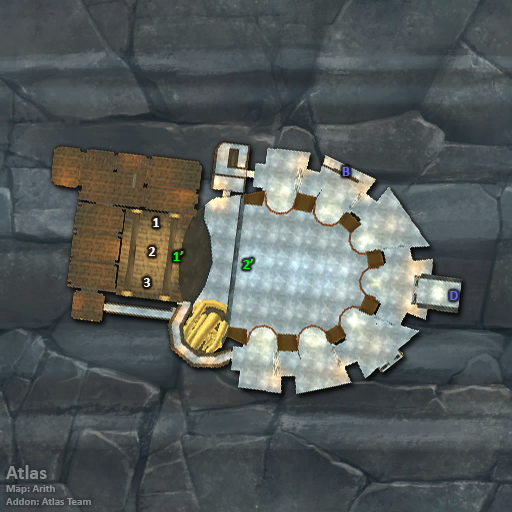
<style>
.page{position:relative;width:512px;height:512px}
.page>*{position:absolute;margin:0}
.t1{font:14px "Calibri-Bold";color:#6666ff}
.t2{font:14px "Calibri-Bold";color:#ffffff}
.t3{font:14px "Calibri-Bold";color:#00ff00}
.t4{font:11px "Calibri-Bold";color:#8a8d8f}
.t5{font:20px "Calibri-Bold";color:#8a8d8f}
</style>
<div class="page">
<p class="t1" style="left:342px;top:167px;width:8px;height:9px">B</p>
<p class="t2" style="left:153px;top:218px;width:6px;height:9px">1</p>
<p class="t2" style="left:149px;top:247px;width:7px;height:9px">2</p>
<p class="t3" style="left:173px;top:251px;width:10px;height:10px">1’</p>
<p class="t3" style="left:243px;top:259px;width:10px;height:10px">2’</p>
<p class="t2" style="left:144px;top:278px;width:6px;height:9px">3</p>
<p class="t1" style="left:450px;top:291px;width:8px;height:9px">D</p>
<p class="t4" style="left:6px;top:465px;width:85px;height:40px"><span class="t5">Atlas<br></span>Map: Arith<br>Addon: Atlas Team</p>
</div>
